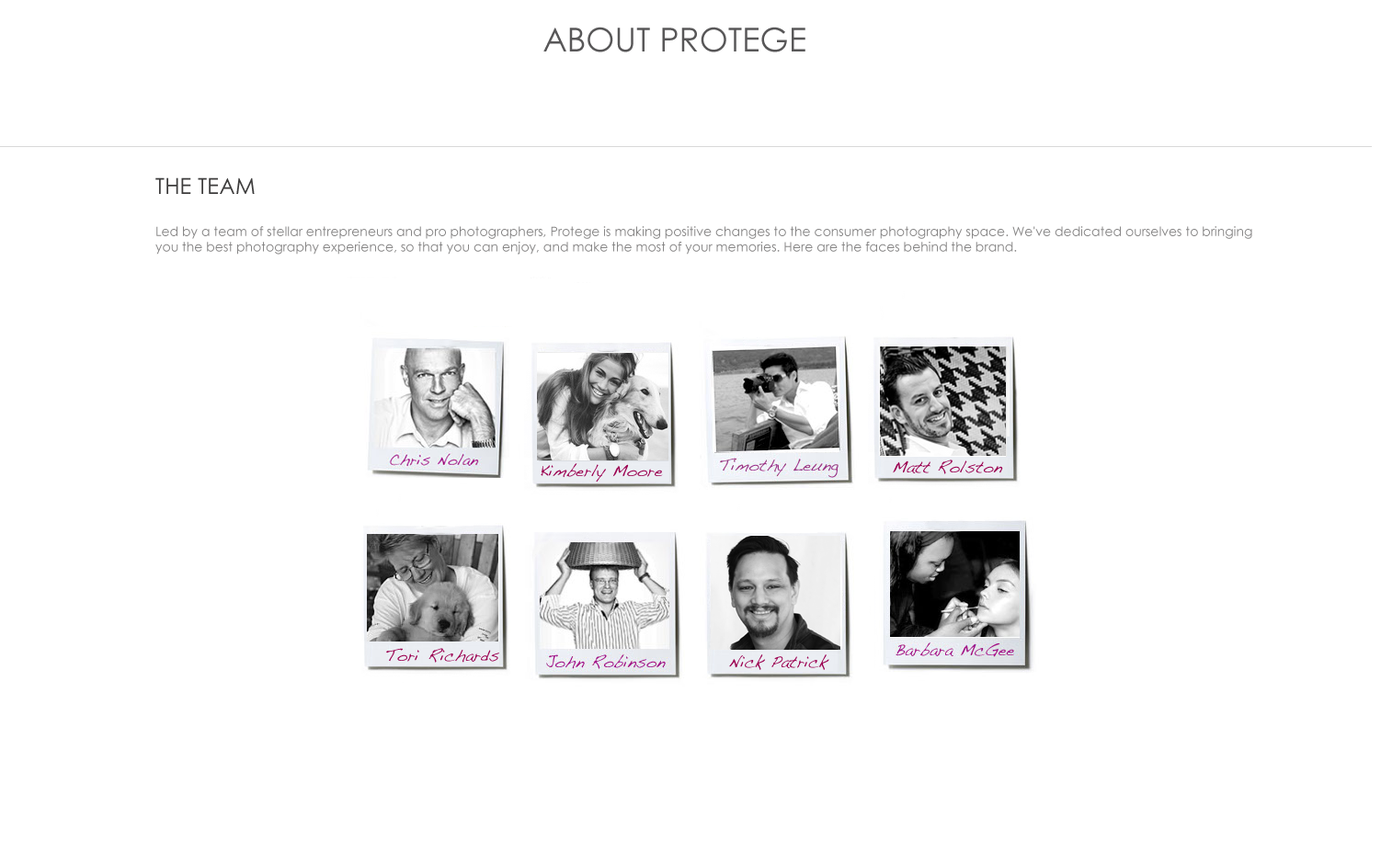
<style>
.page{position:relative;width:1381px;height:863px;background:#ffffff}
.page>*{position:absolute;margin:0}
.t1{font:33.1px "CenturyGothic";color:#585758}
.t2{font:12.9px "CenturyGothic";color:#878686}
.t3{font:12.9px "CenturyGothic";color:#a6a6a6}
.t4{font:22.1px "CenturyGothic";color:#3d3c3c}
</style>
<div class="page">
<p class="t1" style="left:543px;top:27px;width:262px;height:25px">ABOUT PROTEGE</p>
<p class="t2" style="left:155px;top:177px;width:1097px;height:78px"><span class="t3"><br></span><span class="t4">THE TEAM<br><br></span>Led by a team of stellar entrepreneurs and pro photographers, Protege is making positive changes to the consumer photography space. We've dedicated ourselves to bringing you the best photography experience, so that you can enjoy, and make the most of your memories. Here are the faces behind the brand.</p>
</div>
